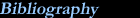
<style>
.page{position:relative;width:140px;height:18px;background:#000000}
.page>*{position:absolute;margin:0}
.t1{font:18px "Garamond-Bold";color:#99ccff;font-style:italic}
</style>
<div class="page">
<p class="t1" style="left:0px;top:2px;width:100px;height:17px">Bibliography</p>
</div>
